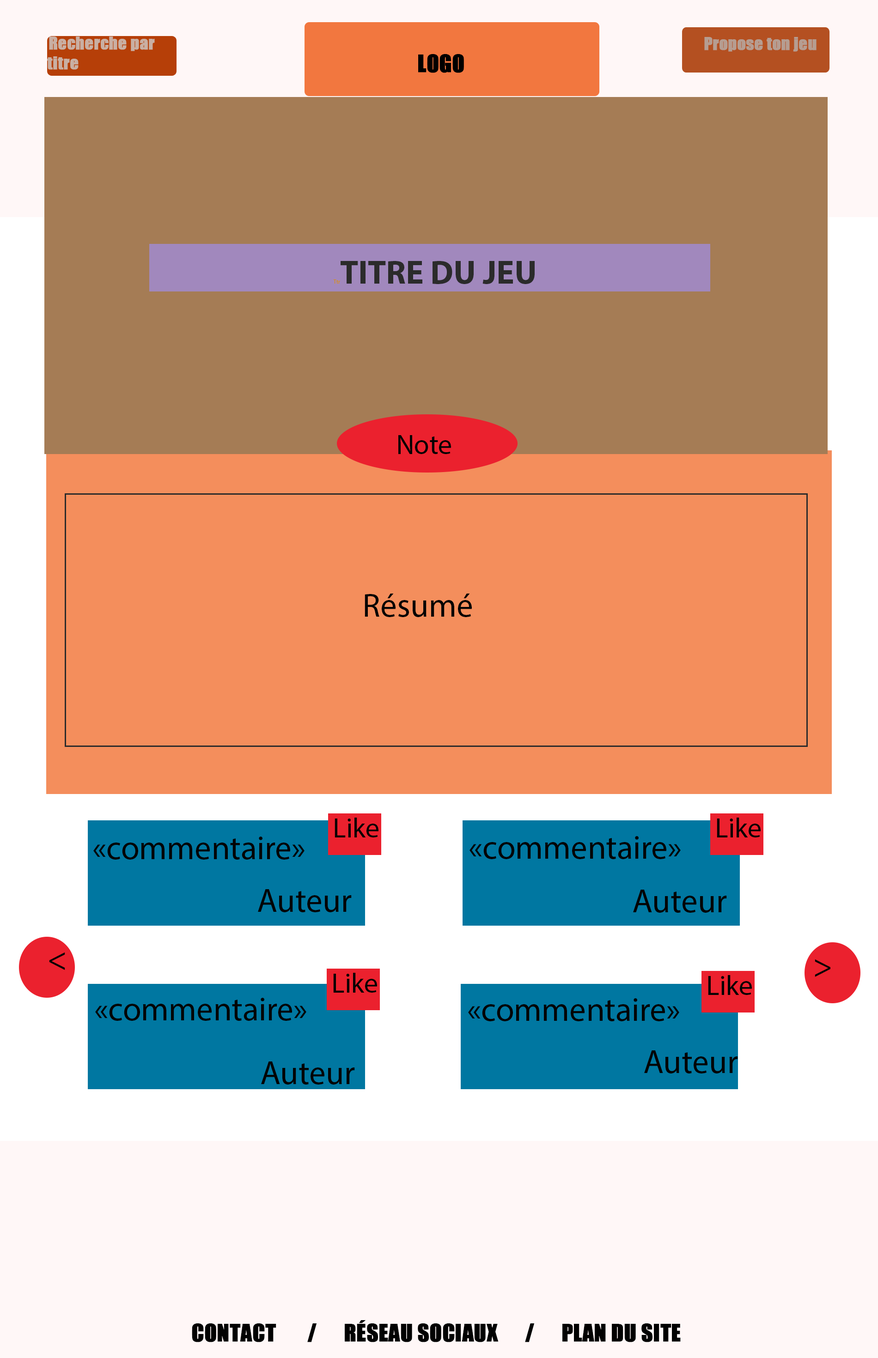
<style>
.page{position:relative;width:878px;height:1358px;background:#f48e5c}
.page>*{position:absolute;margin:0}
.t1{font:16.6px "Impact";color:#b69d91;font-weight:bold}
.t2{font:22.2px "Impact";color:#000000;font-weight:bold}
.t3{font:33.3px "MyriadPro-Bold";color:#2b2b2b}
.t4{font:5.5px "MyriadPro-Regular";color:#d68e12}
.t5{font:27.7px "MyriadPro-Regular";color:#030303}
.t6{font:33.3px "MyriadPro-Regular";color:#030303}
.t7{font:22.2px "Impact";color:#010101;font-weight:bold}
</style>
<div class="page">
<p class="t1" style="left:704px;top:37px;width:112px;height:15px">Propose ton jeu</p>
<p class="t2" style="left:418px;top:54px;width:46px;height:19px">LOGO</p>
<p class="t3" style="left:333px;top:261px;width:202px;height:23px"><span class="t4"><br>Ttr</span>TITRE DU JEU</p>
<p class="t5" style="left:398px;top:435px;width:53px;height:19px">Note</p>
<p class="t6" style="left:365px;top:594px;width:107px;height:23px">Résumé</p>
<p class="t5" style="left:335px;top:818px;width:43px;height:20px">Like</p>
<p class="t5" style="left:717px;top:818px;width:43px;height:20px">Like</p>
<p class="t6" style="left:93px;top:837px;width:211px;height:23px">«commentaire»</p>
<p class="t6" style="left:469px;top:836px;width:212px;height:23px">«commentaire»</p>
<p class="t6" style="left:258px;top:889px;width:94px;height:24px">Auteur</p>
<p class="t6" style="left:633px;top:890px;width:94px;height:23px">Auteur</p>
<p class="t6" style="left:49px;top:952px;width:16px;height:18px">&lt;</p>
<p class="t6" style="left:815px;top:959px;width:15px;height:18px">&gt;</p>
<p class="t5" style="left:333px;top:973px;width:44px;height:20px">Like</p>
<p class="t5" style="left:708px;top:975px;width:44px;height:20px">Like</p>
<p class="t6" style="left:95px;top:998px;width:211px;height:23px">«commentaire»</p>
<p class="t6" style="left:468px;top:998px;width:211px;height:24px">«commentaire»</p>
<p class="t6" style="left:261px;top:1062px;width:94px;height:23px">Auteur</p>
<p class="t6" style="left:644px;top:1051px;width:94px;height:23px">Auteur</p>
<p class="t7" style="left:192px;top:1320px;width:489px;height:23px">CONTACT       /      RÉSEAU SOCIAUX      /      PLAN DU SITE</p>
</div>
